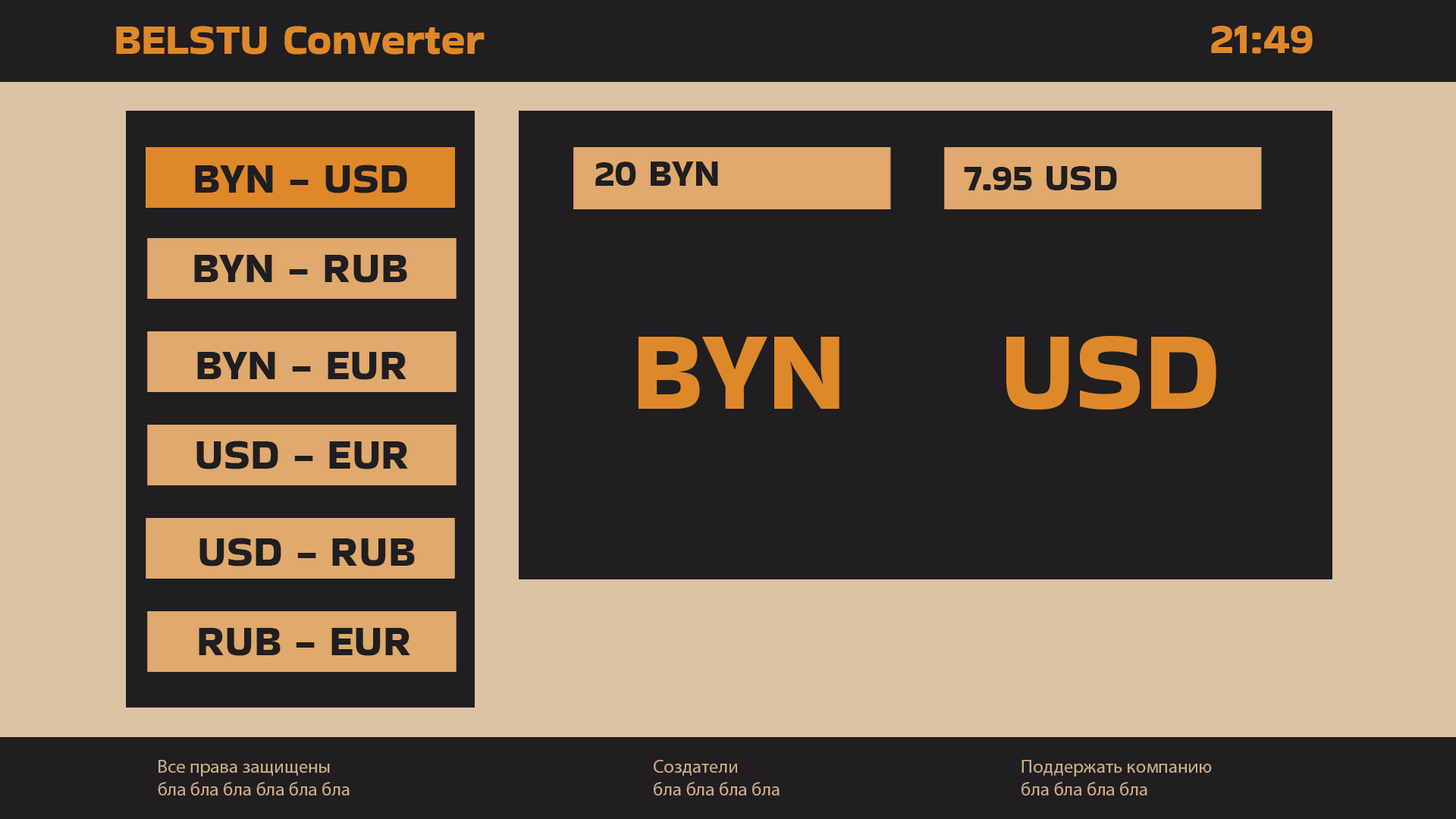
<style>
.page{position:relative;width:1456px;height:819px;background:#201e20}
.page>*{position:absolute;margin:0}
.t1{font:44.2px "BakbakOne-Regular";color:#df8829}
.t2{font:37.9px "BakbakOne-Regular";color:#201e20}
.t3{font:44.2px "BakbakOne-Regular";color:#201e20}
.t4{font:113.7px "BakbakOne-Regular";color:#df8829}
.t5{font:19px "MyriadPro-Regular";color:#c9ab88}
</style>
<div class="page">
<p class="t1" style="left:116px;top:26px;width:369px;height:29px">BELSTU Converter</p>
<p class="t1" style="left:1211px;top:26px;width:102px;height:28px">21:49</p>
<p class="t2" style="left:595px;top:162px;width:123px;height:24px">20 BYN</p>
<p class="t3" style="left:195px;top:165px;width:212px;height:28px">BYN - USD</p>
<p class="t2" style="left:964px;top:166px;width:153px;height:24px">7.95 USD</p>
<p class="t3" style="left:194px;top:255px;width:213px;height:28px">BYN - RUB</p>
<p class="t4" style="left:639px;top:337px;width:200px;height:72px">BYN</p>
<p class="t4" style="left:1006px;top:336px;width:210px;height:73px">USD</p>
<p class="t3" style="left:197px;top:352px;width:209px;height:28px">BYN - EUR</p>
<p class="t3" style="left:196px;top:441px;width:212px;height:28px">USD - EUR</p>
<p class="t3" style="left:199px;top:538px;width:216px;height:28px">USD - RUB</p>
<p class="t3" style="left:199px;top:628px;width:211px;height:28px">RUB - EUR</p>
<p class="t5" style="left:158px;top:760px;width:192px;height:35px">Все права защищены<br>бла бла бла бла бла бла</p>
<p class="t5" style="left:654px;top:760px;width:126px;height:35px">Создатели<br>бла бла бла бла</p>
<p class="t5" style="left:1021px;top:760px;width:191px;height:35px">Поддержать компанию<br>бла бла бла бла</p>
</div>
